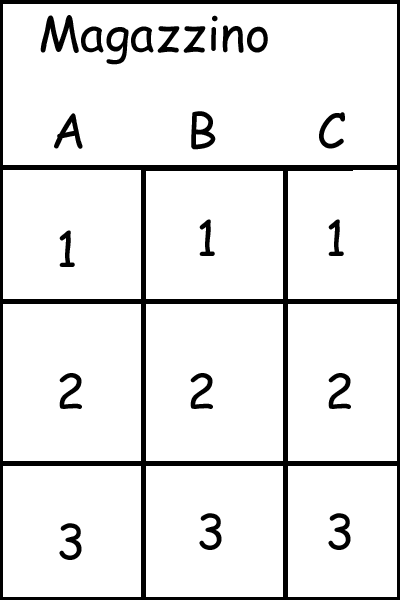
<style>
.page{position:relative;width:400px;height:600px;background:#ffffff}
.page>*{position:absolute;margin:0}
.t1{font:48px "ComicSansMS";color:#000000}
</style>
<div class="page">
<p class="t1" style="left:54px;top:113px;width:29px;height:36px">A</p>
<p class="t1" style="left:191px;top:111px;width:25px;height:39px">B</p>
<p class="t1" style="left:319px;top:112px;width:26px;height:37px">C</p>
<p class="t1" style="left:199px;top:219px;width:16px;height:37px">1</p>
<p class="t1" style="left:328px;top:219px;width:16px;height:37px">1</p>
<p class="t1" style="left:59px;top:230px;width:16px;height:37px">1</p>
<p class="t1" style="left:59px;top:373px;width:23px;height:36px">2</p>
<p class="t1" style="left:190px;top:373px;width:23px;height:36px">2</p>
<p class="t1" style="left:328px;top:373px;width:23px;height:36px">2</p>
<p class="t1" style="left:199px;top:513px;width:23px;height:37px">3</p>
<p class="t1" style="left:328px;top:513px;width:23px;height:37px">3</p>
<p class="t1" style="left:59px;top:523px;width:23px;height:37px">3</p>
</div>
